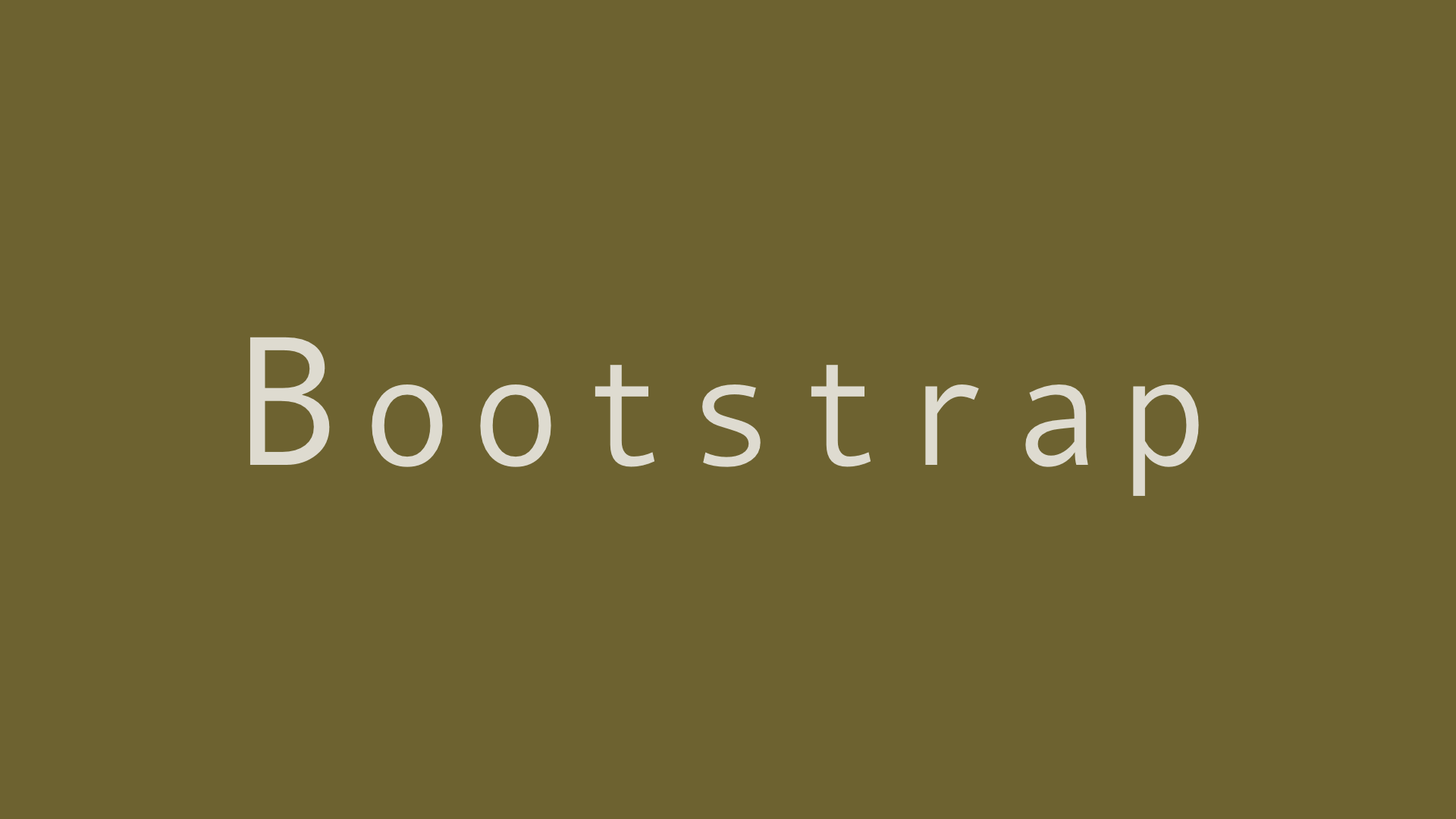
<style>
.page{position:relative;width:1456px;height:819px;background:#6d6230}
.page>*{position:absolute;margin:0}
.t1{font:154.3px "AndaleMono";letter-spacing:0.1em;color:#dedbd0}
.t2{font:185.1px "AndaleMono";letter-spacing:0.1em;color:#dedbd0}
</style>
<div class="page">
<p class="t1" style="left:249px;top:337px;width:950px;height:159px"><span class="t2">B</span>ootstrap</p>
</div>
